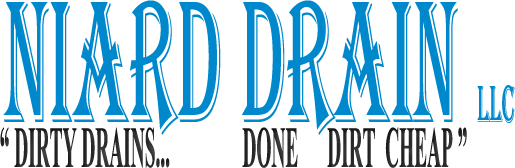
<style>
.page{position:relative;width:515px;height:168px;background:#ffffff}
.page>*{position:absolute;margin:0}
.t1{font:180px "Algerian";color:#0088cc;scale:0.42 1}
.t2{font:54px "Algerian";color:#0088cc;scale:0.42 1}
.t3{font:72px "Aparajita-Bold";color:#2a2a2b;scale:0.33 1}
.t4{font:72px "Aparajita-Bold";color:#28282a;scale:0.33 1}
</style>
<div class="page">
<p class="t1" style="left:3px;top:0px;width:512px;height:135px">Niard Drain <span class="t2">LLC</span></p>
<p class="t3" style="left:0px;top:127px;width:170px;height:41px">“ DIRTY DRAINS...</p>
<p class="t4" style="left:242px;top:127px;width:225px;height:41px">DONE      DIRT  CHEAP ”</p>
</div>
